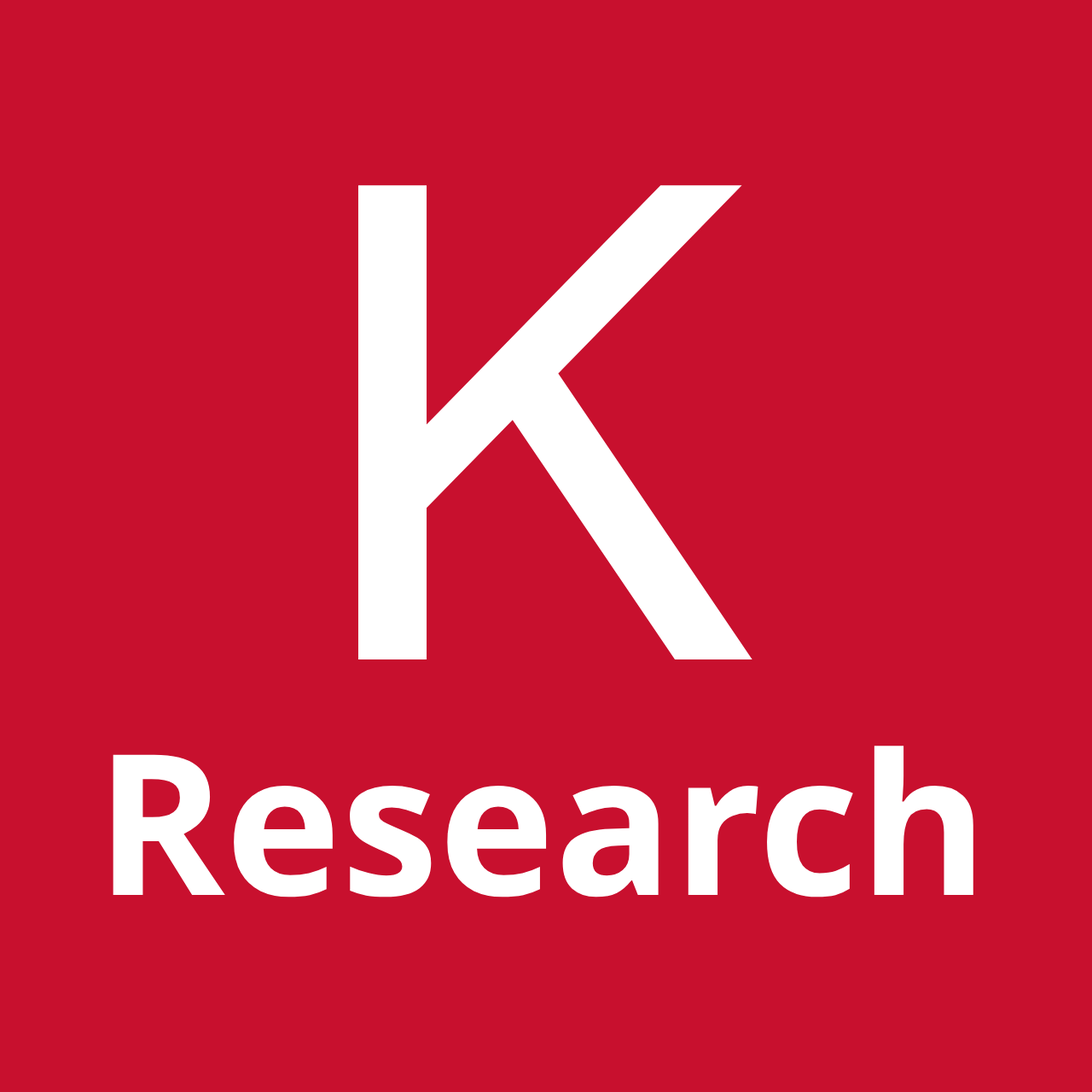
<style>
.page{position:relative;width:1092px;height:1092px;background:#c8102e}
.page>*{position:absolute;margin:0}
.t1{font:196.2px "NotoSans-Bold";color:#ffffff}
.t2{font:682.5px "CMUBright-SemiBold";color:#dc343b}
</style>
<div class="page">
<p class="t1" style="left:113px;top:185px;width:860px;height:712px;text-align:center"><span class="t2">K<br></span>Research</p>
</div>
